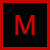
<style>
.page{position:relative;width:50px;height:50px;background:#040404}
.page>*{position:absolute;margin:0}
.t1{font:27.6px "LucidaGrande";color:#c70505}
</style>
<div class="page">
<p class="t1" style="left:15px;top:15px;width:20px;height:20px">M</p>
</div>
